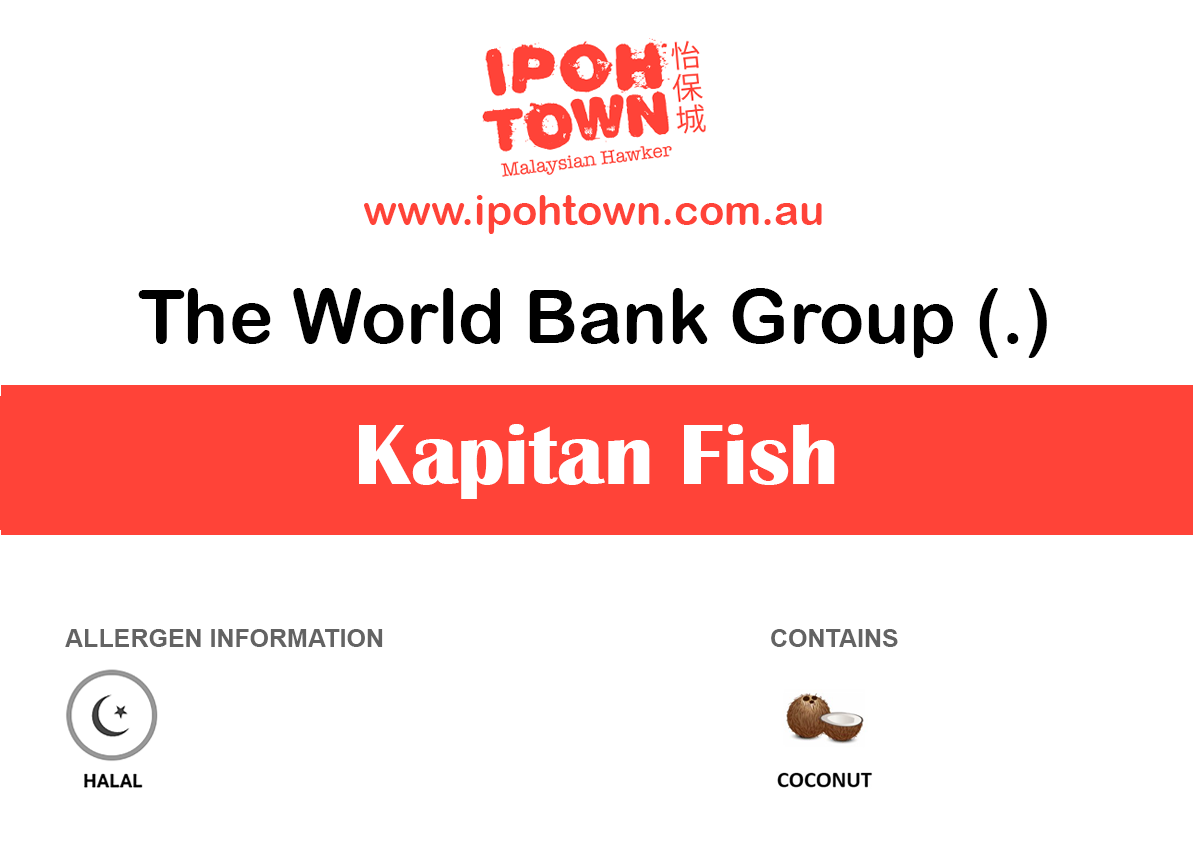
<style>
.page{position:relative;width:1193px;height:850px;background:#ffffff}
.page>*{position:absolute;margin:0}
.t1{font:41.7px "ArialRoundedMTBold";color:#ff4338}
.t2{font:75px "ArialRoundedMTBold";color:#000000}
.t3{font:87.5px "BritannicBold";color:#ffffff}
.t4{font:25px "Arial-BoldMT";color:#636363}
</style>
<div class="page">
<p class="t1" style="left:364px;top:195px;width:458px;height:39px">www.ipohtown.com.au</p>
<p class="t2" style="left:138px;top:288px;width:909px;height:70px">The World Bank Group (.)</p>
<p class="t3" style="left:359px;top:424px;width:476px;height:75px">Kapitan Fish</p>
<p class="t4" style="left:65px;top:629px;width:318px;height:18px">ALLERGEN INFORMATION</p>
<p class="t4" style="left:771px;top:629px;width:127px;height:18px">CONTAINS</p>
</div>
